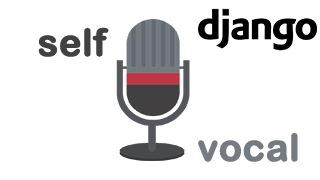
<style>
.page{position:relative;width:320px;height:180px;background:#ffffff}
.page>*{position:absolute;margin:0}
.t1{font:37.5px "ArialRoundedMTBold";color:#434041;font-weight:bold}
.t2{font:37.5px "ArialRoundedMTBold";color:#747c82;font-weight:bold}
</style>
<div class="page">
<p class="t1" style="left:38px;top:27px;width:71px;height:30px">self</p>
<p class="t2" style="left:198px;top:132px;width:100px;height:30px">vocal</p>
</div>
